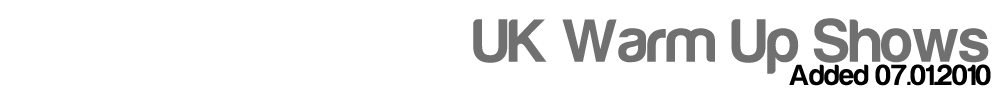
<style>
.page{position:relative;width:1000px;height:100px;background:#ffffff}
.page>*{position:absolute;margin:0}
.t1{font:63px "Harabara-Bold";color:#707070}
.t2{font:30px "Harabara-Bold";color:#000000}
</style>
<div class="page">
<p class="t1" style="left:473px;top:18px;width:516px;height:56px">UK Warm Up Shows</p>
<p class="t2" style="left:789px;top:64px;width:202px;height:22px">Added 07.01.2010</p>
</div>
